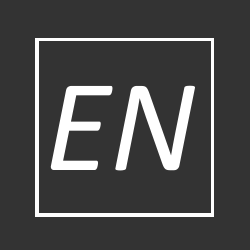
<style>
.page{position:relative;width:250px;height:250px;background:#333333}
.page>*{position:absolute;margin:0}
.t1{font:132.7px "Calibri-Italic";color:#ffffff}
</style>
<div class="page">
<p class="t1" style="left:50px;top:85px;width:145px;height:86px">EN</p>
</div>
